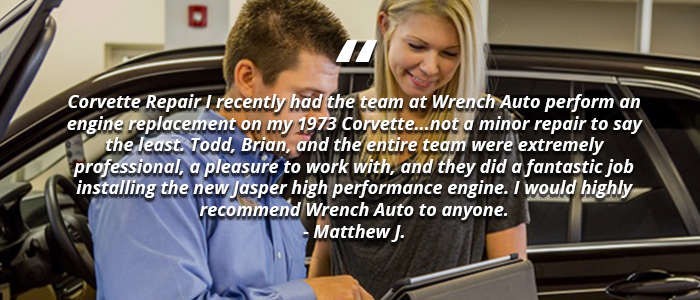
<style>
.page{position:relative;width:700px;height:300px}
.page>*{position:absolute;margin:0}
.t1{font:90px "OpenSans-BoldItalic";color:#fefffe}
.t2{font:18px "OpenSans-BoldItalic";color:#fefffe}
</style>
<div class="page">
<p class="t1" style="left:336px;top:40px;width:41px;height:22px">“</p>
<p class="t2" style="left:67px;top:94px;width:576px;height:148px;text-align:center">Corvette Repair I recently had the team at Wrench Auto perform an engine replacement on my 1973 Corvette...not a minor repair to say the least. Todd, Brian, and the entire team were extremely <br>professional, a pleasure to work with, and they did a fantastic job installing the new Jasper high performance engine. I would highly recommend Wrench Auto to anyone.<br>- Matthew J.</p>
</div>
